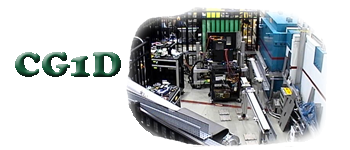
<style>
.page{position:relative;width:350px;height:150px;background:#ffffff}
.page>*{position:absolute;margin:0}
.t1{font:37px "CooperBlack"}
</style>
<div class="page">
<p class="t1" style="left:15px;top:52px;width:106px;height:25px">CG1D</p>
</div>
